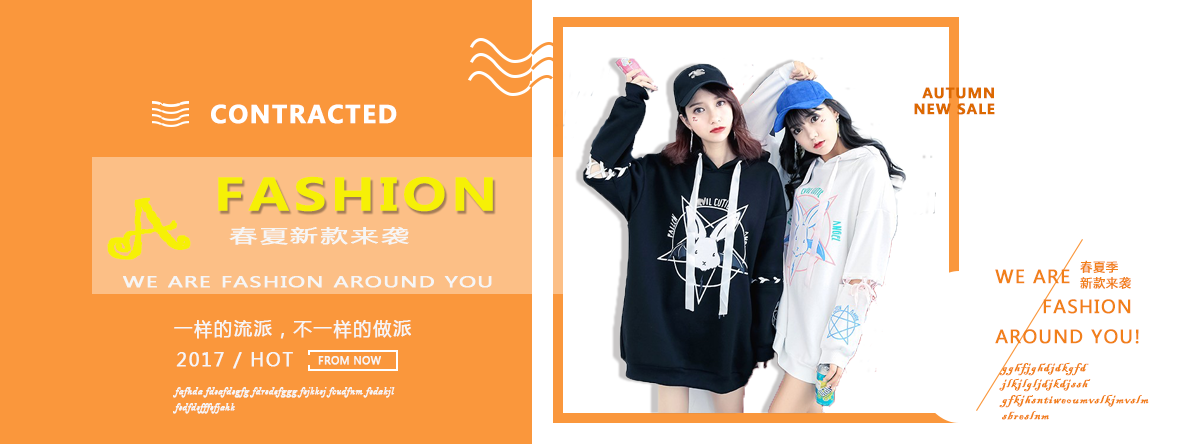
<style>
.page{position:relative;width:1194px;height:444px;background:#ffffff}
.page>*{position:absolute;margin:0}
.t1{font:14px/16px "MicrosoftYaHei-Bold";letter-spacing:0.05em;color:#dc6900;font-weight:bold}
.t2{font:24px "MicrosoftYaHei-Bold";letter-spacing:0.05em;color:#ffffff;font-weight:bold}
.t3{font:43.7px "MicrosoftYaHei-Bold";letter-spacing:0.05em;color:#f6f006;font-weight:bold;scale:1.25 1}
.t4{font:86.1px "Gigi-Regular";letter-spacing:0.05em;color:#f6f006;font-weight:bold;scale:1.1 1}
.t5{font:18px "MicrosoftYaHei";letter-spacing:0.05em;color:#f6f6f6;font-weight:bold;scale:1.52 1}
.t6{font:18px/30px "MicrosoftYaHei";letter-spacing:0.05em;color:#f18019;font-weight:bold}
.t7{font:12px/16px "MicrosoftYaHei";letter-spacing:0.05em;color:#f18019;font-weight:bold}
.t8{font:14px "MicrosoftYaHei";letter-spacing:0.05em;color:#f6f6f6;font-weight:bold;scale:1.52 1}
.t9{font:18px "MicrosoftYaHei";letter-spacing:0.05em;color:#f6f6f6;font-weight:bold}
.t10{font:10px "MicrosoftYaHei";letter-spacing:0.05em;color:#f6f6f6;font-weight:bold}
.t11{font:14px/16px "BlackadderITC-Regular";letter-spacing:0.05em;color:#f18019;font-weight:bold}
.t12{font:10px/16px "BellMTItalic";letter-spacing:0.05em;color:#f6f6f6;font-weight:bold}
</style>
<div class="page">
<p class="t1" style="left:914px;top:87px;width:81px;height:28px;text-align:right">AUTUMN<br>NEW SALE</p>
<p class="t2" style="left:211px;top:104px;width:186px;height:20px">CONTRACTED</p>
<p class="t3" style="left:218px;top:176px;width:275px;height:36px">FASHION</p>
<p class="t4" style="left:107px;top:197px;width:84px;height:63px;rotate:-11deg">A</p>
<p class="t5" style="left:229px;top:227px;width:180px;height:18px">春夏新款来袭</p>
<p class="t6" style="left:995px;top:269px;width:144px;height:75px">WE ARE<br>       FASHION<br>AROUND YOU!</p>
<p class="t7" style="left:1080px;top:260px;width:51px;height:29px">春夏季<br>新款来袭</p>
<p class="t8" style="left:123px;top:276px;width:369px;height:12px">WE ARE FASHION AROUND YOU</p>
<p class="t9" style="left:174px;top:320px;width:237px;height:19px">一样的流派，不一样的做派</p>
<p class="t9" style="left:176px;top:352px;width:117px;height:17px">2017 / HOT</p>
<p class="t10" style="left:318px;top:356px;width:63px;height:9px">FROM NOW</p>
<p class="t11" style="left:999px;top:362px;width:150px;height:58px">gghfjghdjdkgfd<br>jlkjlgljdjkdjssh<br>gfkjhsntiweoumvslkjmvslm<br>sbreslnm</p>
<p class="t12" style="left:173px;top:387px;width:222px;height:27px">fafhda fdsafdsgfg fdrsdefggg fsjkksj fcudfnm fsdakjl<br>fsdfdsfffsfjahk</p>
</div>
